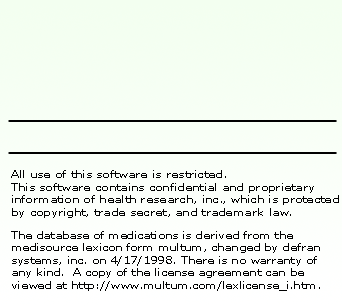
<style>
.page{position:relative;width:342px;height:306px}
.page>*{position:absolute;margin:0}
.t1{font:10.4px "MSReferenceSansSerif";color:#000000;scale:1.12 1}
</style>
<div class="page">
<p class="t1" style="left:11px;top:170px;width:328px;height:48px">All use of this software is restricted.<br>This software contains confidential and proprietary <br>information of health research, inc., which is protected <br>by copyright, trade secret, and trademark law.</p>
<p class="t1" style="left:11px;top:231px;width:309px;height:60px">The database of medications is derived from the <br>medisource lexicon form multum, changed by defran <br>systems, inc. on 4/17/1998. There is no warranty of <br>any kind.  A copy of the license agreement can be <br>viewed at http://www.multum.com/lexlicense_i.htm.</p>
</div>
